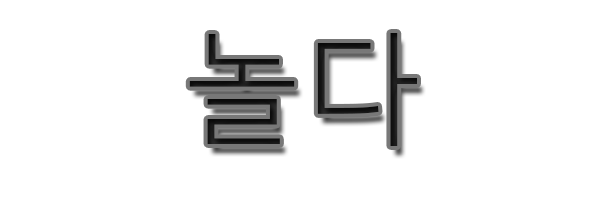
<style>
.page{position:relative;width:600px;height:200px;background:#ffffff}
.page>*{position:absolute;margin:0}
.t1{font:120px "MalgunGothic-Semilight";color:#121212}
</style>
<div class="page">
<p class="t1" style="left:189px;top:33px;width:228px;height:113px">놀다</p>
</div>
